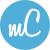
<style>
.page{position:relative;width:50px;height:50px;background:#51aed9}
.page>*{position:absolute;margin:0}
.t1{font:40px "HoneyScript-SemiBold";color:#ffffff}
</style>
<div class="page">
<p class="t1" style="left:8px;top:8px;width:33px;height:29px">mC</p>
</div>
